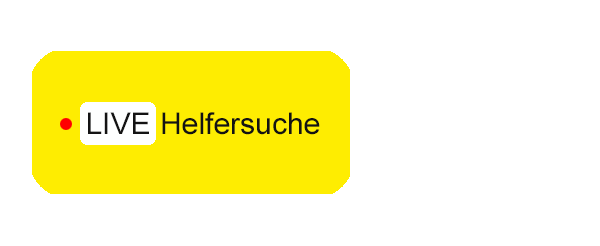
<style>
.page{position:relative;width:600px;height:246px;background:#ffffff}
.page>*{position:absolute;margin:0}
.t1{font:30px "ArialMT";color:#131313}
</style>
<div class="page">
<p class="t1" style="left:88px;top:112px;width:61px;height:22px">LIVE</p>
<p class="t1" style="left:162px;top:112px;width:158px;height:23px">Helfersuche</p>
</div>
